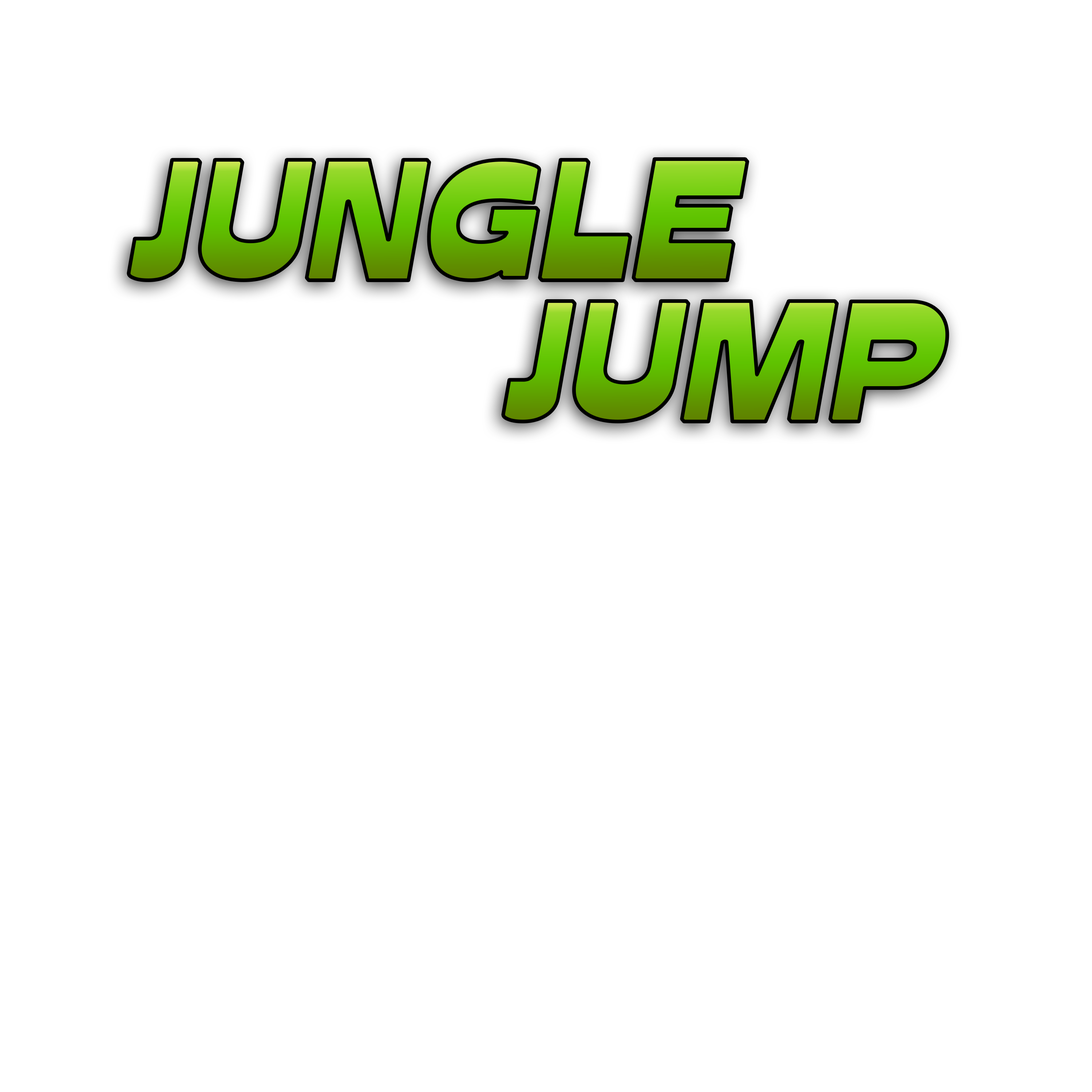
<style>
.page{position:relative;width:1092px;height:1092px;background:#ffffff}
.page>*{position:absolute;margin:0}
.t1{font:159.2px "Glockenspiel";font-weight:bold;font-style:italic}
</style>
<div class="page">
<p class="t1" style="left:128px;top:159px;width:620px;height:121px">JUNGLE</p>
<p class="t1" style="left:503px;top:301px;width:444px;height:121px">JUMP</p>
</div>
